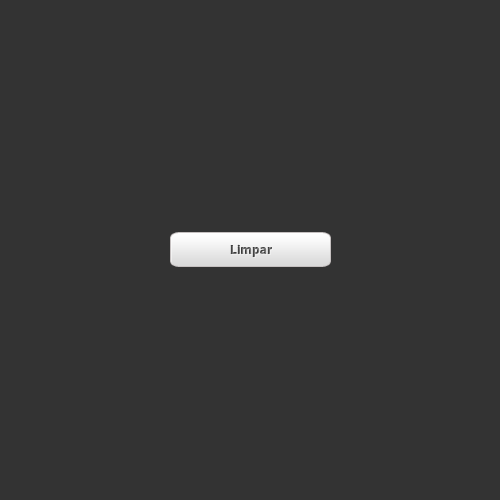
<style>
.page{position:relative;width:500px;height:500px;background:#333333}
.page>*{position:absolute;margin:0}
.t1{font:13.3px "MyriadPro-Bold"}
</style>
<div class="page">
<p class="t1" style="left:230px;top:244px;width:42px;height:13px">Limpar</p>
</div>
